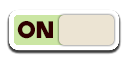
<style>
.page{position:relative;width:128px;height:64px;background:#ffffff}
.page>*{position:absolute;margin:0}
.t1{font:24px "Generica-Bold";color:#2f0000}
</style>
<div class="page">
<p class="t1" style="left:17px;top:21px;width:36px;height:18px">ON</p>
</div>
